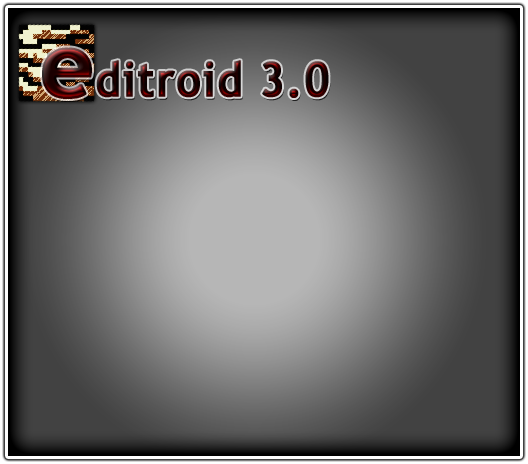
<style>
.page{position:relative;width:528px;height:464px}
.page>*{position:absolute;margin:0}
.t1{font:92.9px "TrebuchetMS-Bold";letter-spacing:0.025em;font-weight:bold}
.t2{font:47.8px "TrebuchetMS-Bold";letter-spacing:0.025em;font-weight:bold;scale:0.89 1}
</style>
<div class="page">
<p class="t1" style="left:42px;top:47px;width:50px;height:52px">e</p>
<p class="t2" style="left:96px;top:60px;width:233px;height:38px">ditroid 3.0</p>
</div>
